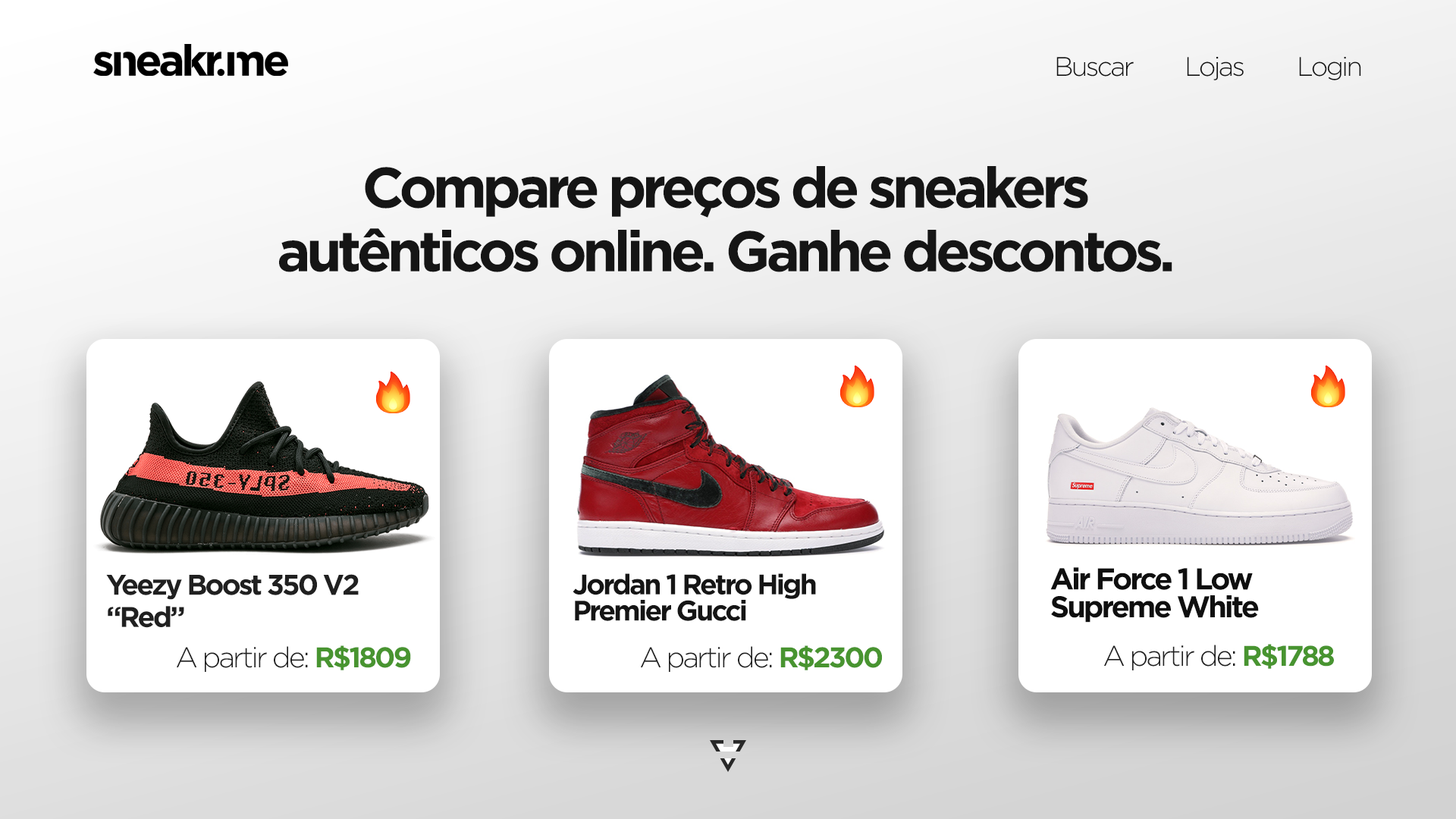
<style>
.page{position:relative;width:1456px;height:819px;background:#ffffff}
.page>*{position:absolute;margin:0}
.t1{font:26.8px "Gotham-Light";letter-spacing:-0.075em;color:#151515}
.t2{font:56.9px/63.8px "Gotham-Bold";letter-spacing:-0.075em;color:#151515}
.t3{font:30px/27.8px "Gotham-Bold";letter-spacing:-0.075em;color:#0f0f0f}
.t4{font:28.5px/32.2px "Gotham-Bold";letter-spacing:-0.075em;color:#202020}
.t5{font:28.3px/26.1px "Gotham-Bold";letter-spacing:-0.075em;color:#151515}
.t6{font:28.5px "Gotham-Light";letter-spacing:-0.075em;color:#202020}
.t7{font:28.5px "Gotham-Bold";letter-spacing:-0.075em;color:#489430}
</style>
<div class="page">
<p class="t1" style="left:1056px;top:57px;width:78px;height:20px">Buscar</p>
<p class="t1" style="left:1187px;top:57px;width:57px;height:23px">Lojas</p>
<p class="t1" style="left:1299px;top:57px;width:62px;height:23px">Login</p>
<p class="t2" style="left:279px;top:166px;width:893px;height:106px;text-align:center">Compare preços de sneakers<br>autênticos online. Ganhe descontos.</p>
<p class="t3" style="left:1050px;top:567px;width:209px;height:56px">Air Force 1 Low<br>Supreme White</p>
<p class="t4" style="left:106px;top:574px;width:253px;height:54px">Yeezy Boost 350 V2<br>“Red”</p>
<p class="t5" style="left:573px;top:573px;width:243px;height:48px">Jordan 1 Retro High<br>Premier Gucci</p>
<p class="t6" style="left:177px;top:645px;width:234px;height:27px">A partir de: <span class="t7">R$1809</span></p>
<p class="t6" style="left:641px;top:645px;width:242px;height:27px">A partir de: <span class="t7">R$2300</span></p>
<p class="t6" style="left:1104px;top:644px;width:230px;height:26px">A partir de: <span class="t7">R$1788</span></p>
</div>
